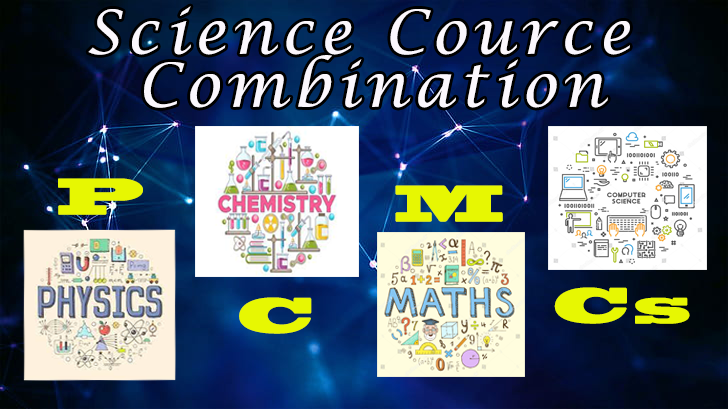
<style>
.page{position:relative;width:728px;height:409px}
.page>*{position:absolute;margin:0}
.t1{font:60px/53px "LucidaCalligraphy-Italic";letter-spacing:0.1em;color:#fbf7fd}
.t2{font:48px "BlackoakStd";letter-spacing:0.1em;color:#e7f702}
</style>
<div class="page">
<p class="t1" style="left:88px;top:6px;width:542px;height:102px;text-align:center">Science Cource <br>Combination</p>
<p class="t2" style="left:58px;top:178px;width:85px;height:37px">P</p>
<p class="t2" style="left:395px;top:185px;width:108px;height:37px">M</p>
<p class="t2" style="left:554px;top:287px;width:136px;height:37px">Cs</p>
<p class="t2" style="left:239px;top:297px;width:73px;height:37px">C</p>
</div>
